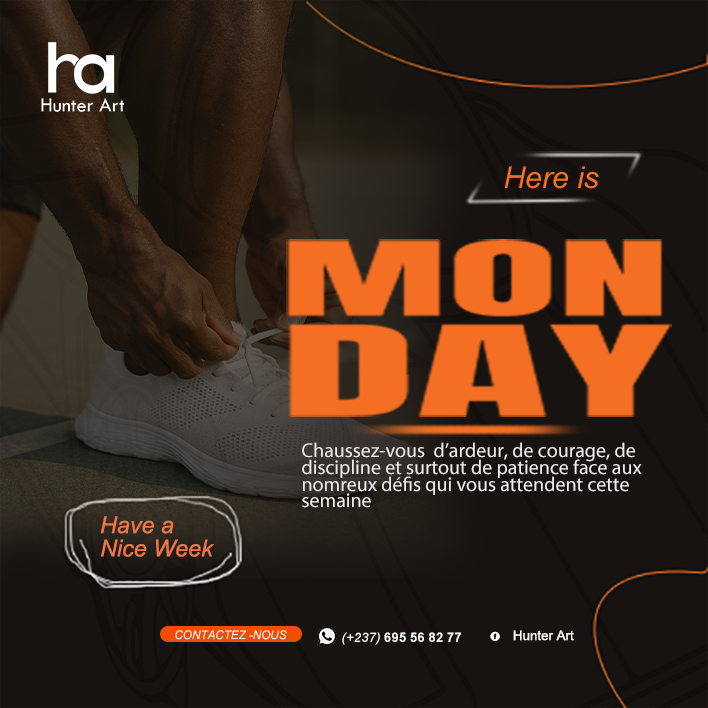
<style>
.page{position:relative;width:708px;height:708px;background:#171310}
.page>*{position:absolute;margin:0}
.t1{font:30px "Arial-ItalicMT";color:#f77025}
.t2{font:20px/16.7px "MyriadPro-Regular";color:#eeeceb}
.t3{font:23.3px/23.3px "Arial-ItalicMT";color:#eb7748}
.t4{font:11.7px "Arial-ItalicMT";color:#fcfcfc}
.t5{font:13.3px "ArialMT";color:#fcfcfc}
.t6{font:13.3px "Arial-BoldMT";color:#fcfcfc}
.t7{font:13.3px "Arial-ItalicMT";color:#fcfcfc}
</style>
<div class="page">
<p class="t1" style="left:504px;top:166px;width:95px;height:23px">Here is</p>
<p class="t2" style="left:302px;top:442px;width:340px;height:66px">Chaussez-vous  d’ardeur, de courage, de discipline et surtout de patience face aux nomreux défis qui vous attendent cette semaine</p>
<p class="t3" style="left:100px;top:516px;width:114px;height:41px">Have a <br>Nice Week</p>
<p class="t4" style="left:175px;top:630px;width:112px;height:10px">CONTACTEZ -NOUS</p>
<p class="t5" style="left:513px;top:630px;width:61px;height:11px">Hunter Art</p>
<p class="t6" style="left:342px;top:632px;width:119px;height:13px"><span class="t7">(+237) </span>695 56 82 77</p>
</div>
